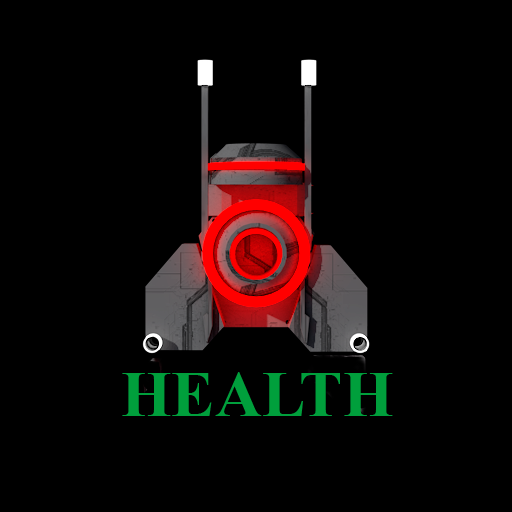
<style>
.page{position:relative;width:512px;height:512px;background:#000000}
.page>*{position:absolute;margin:0}
.t1{font:65px "TimesNewRomanPS-BoldMT";color:#009f3c}
</style>
<div class="page">
<p class="t1" style="left:122px;top:372px;width:271px;height:44px">HEALTH</p>
</div>
